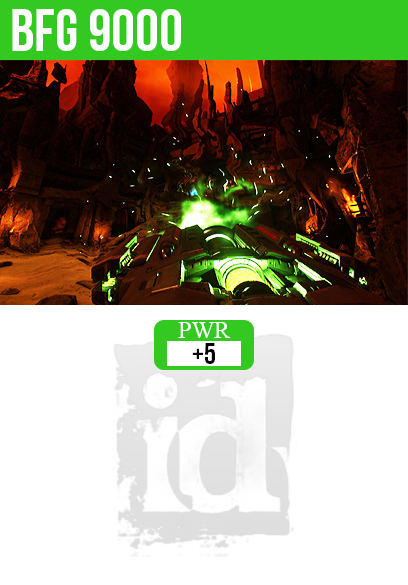
<style>
.page{position:relative;width:408px;height:585px;background:#ffffff}
.page>*{position:absolute;margin:0}
.t1{font:60px "BebasNeue";color:#ffffff}
.t2{font:24px "TimesNewRomanPSMT";color:#ffffff}
.t3{font:30px "BebasNeue";color:#000000}
</style>
<div class="page">
<p class="t1" style="left:12px;top:9px;width:169px;height:42px">bfg 9000</p>
<p class="t2" style="left:178px;top:322px;width:53px;height:16px">PWR</p>
<p class="t3" style="left:192px;top:343px;width:23px;height:21px">+5</p>
</div>
